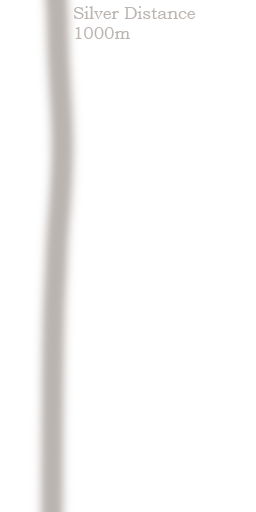
<style>
.page{position:relative;width:256px;height:512px;background:#ffffff}
.page>*{position:absolute;margin:0}
.t1{font:16.7px "BookmanOldStyle";color:#bbb5b1}
</style>
<div class="page">
<p class="t1" style="left:74px;top:6px;width:121px;height:33px">Silver Distance<br>1000m</p>
</div>
